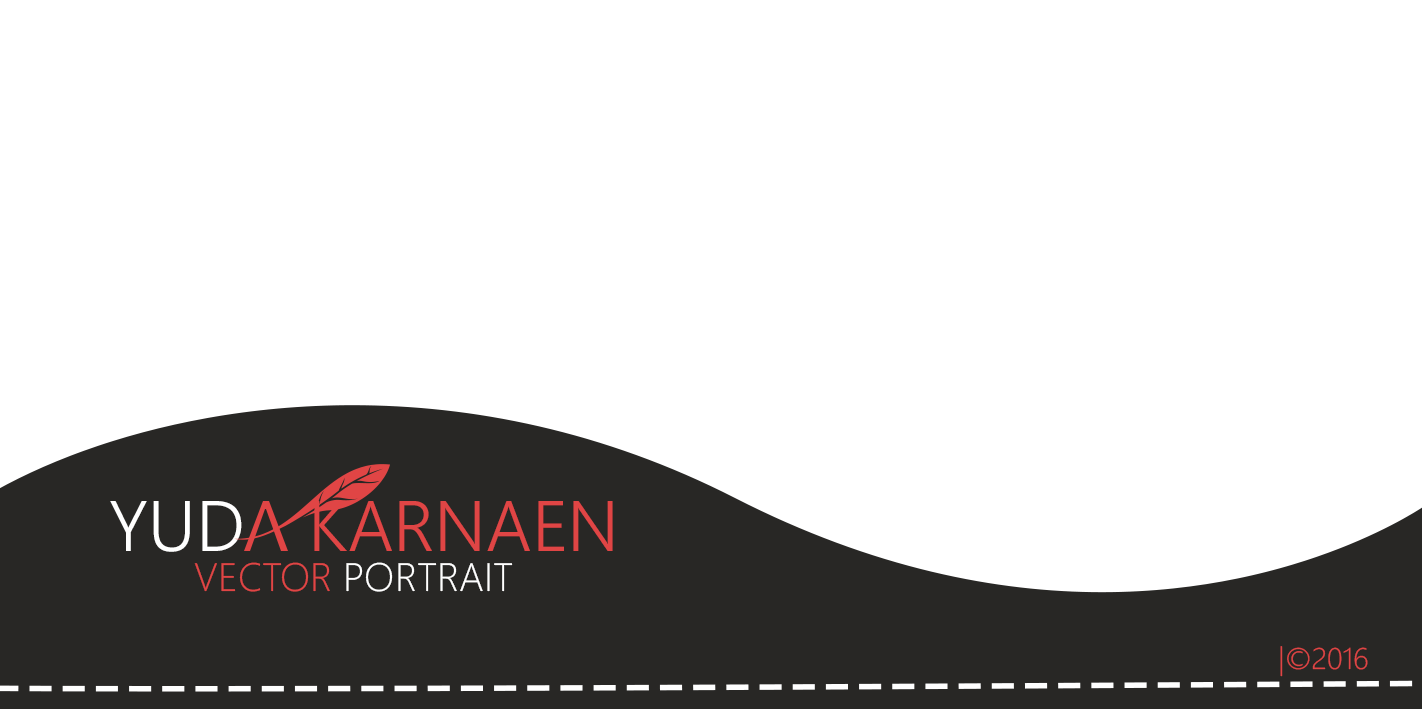
<style>
.page{position:relative;width:1422px;height:709px;background:#ffffff}
.page>*{position:absolute;margin:0}
.t1{font:71.1px "SegoeUI-Semilight";color:#e04545}
.t2{font:71.1px "SegoeUI-Semilight";color:#ffffff}
.t3{font:71.1px "SegoeUI-Semilight";color:#282725}
.t4{font:39.7px "SegoeUI-Light";color:#ffffff}
.t5{font:39.7px "SegoeUI-Light";color:#e04545}
.t6{font:29.8px "SegoeUI-Light";color:#e04545}
</style>
<div class="page">
<p class="t1" style="left:110px;top:501px;width:503px;height:51px"><span class="t2">YUD</span><span class="t3">A </span>KARNAEN</p>
<p class="t4" style="left:194px;top:562px;width:319px;height:30px"><span class="t5">VECTOR</span> PORTRAIT</p>
<p class="t6" style="left:1280px;top:646px;width:88px;height:31px">|©2016</p>
</div>
